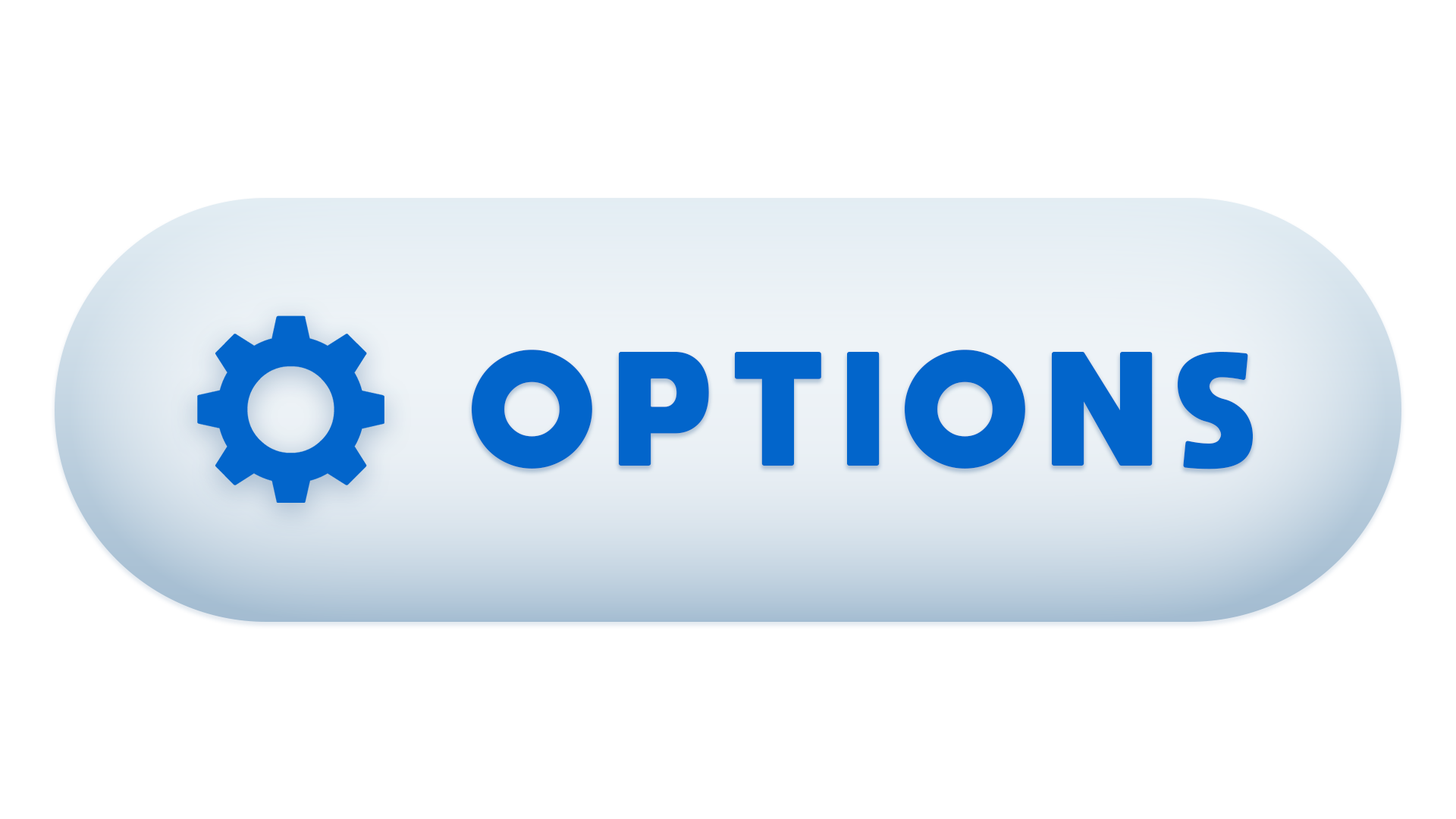
<style>
.page{position:relative;width:1456px;height:819px;background:#ffffff}
.page>*{position:absolute;margin:0}
.t1{font:113.7px "moon_get-Heavy";letter-spacing:0.2em;color:#0265cb}
</style>
<div class="page">
<p class="t1" style="left:472px;top:350px;width:781px;height:119px">OPTIONS</p>
</div>
